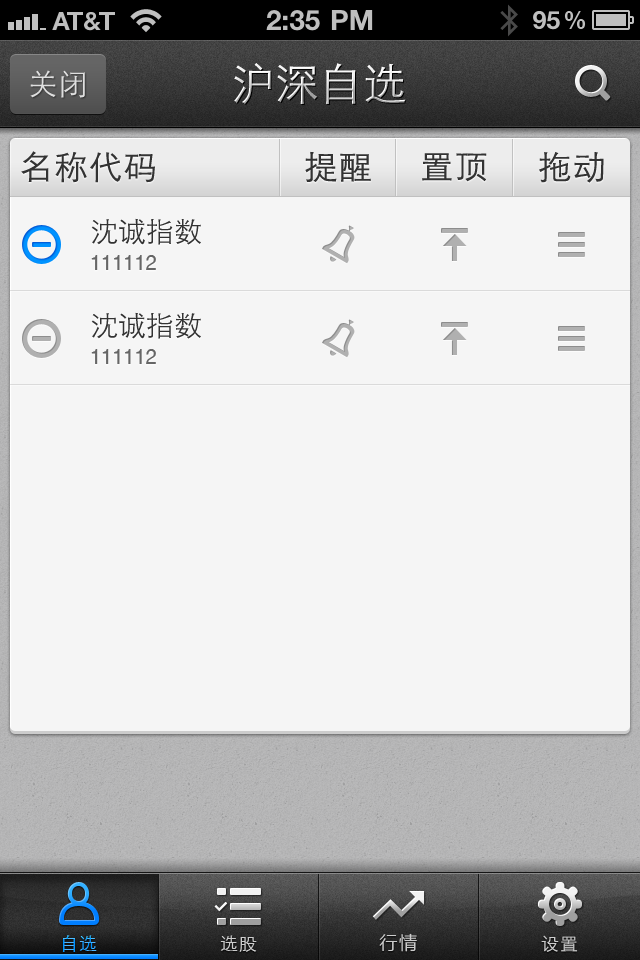
<style>
.page{position:relative;width:640px;height:960px;background:#f5f5f5}
.page>*{position:absolute;margin:0}
.t1{font:44px "STXihei";letter-spacing:0.005em}
.t2{font:30px "STXihei";letter-spacing:0.005em;color:#dfdfdf}
.t3{font:33px "STXihei";letter-spacing:0.05em;color:#333333}
.t4{font:28px "STXihei";color:#333333}
.t5{font:20px "HelveticaCE-Regular";color:#5c6370}
.t6{font:18px "STXihei";letter-spacing:0.05em}
.t7{font:18px "STXihei";letter-spacing:0.05em;color:#cccccc}
.t8{font:18px "MicrosoftYaHei";letter-spacing:0.1em;color:#cccccc}
</style>
<div class="page">
<p class="t1" style="left:234px;top:63px;width:172px;height:41px">沪深自选</p>
<p class="t2" style="left:30px;top:70px;width:55px;height:28px">关闭</p>
<p class="t3" style="left:21px;top:151px;width:134px;height:32px">名称代码</p>
<p class="t3" style="left:305px;top:151px;width:66px;height:31px">提醒</p>
<p class="t3" style="left:422px;top:153px;width:65px;height:29px">置顶</p>
<p class="t3" style="left:539px;top:152px;width:65px;height:31px">拖动</p>
<p class="t4" style="left:91px;top:218px;width:110px;height:27px">沈诚指数</p>
<p class="t5" style="left:91px;top:255px;width:65px;height:15px">111112</p>
<p class="t4" style="left:91px;top:312px;width:110px;height:27px">沈诚指数</p>
<p class="t5" style="left:91px;top:349px;width:65px;height:15px">111112</p>
<p class="t6" style="left:62px;top:935px;width:35px;height:17px">自选</p>
<p class="t7" style="left:220px;top:935px;width:37px;height:17px">选股</p>
<p class="t8" style="left:379px;top:933px;width:38px;height:19px">行情</p>
<p class="t7" style="left:541px;top:935px;width:37px;height:17px">设置</p>
</div>
